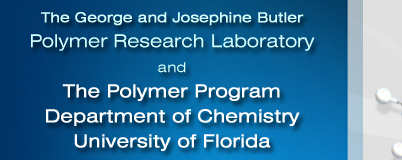
<style>
.page{position:relative;width:402px;height:160px}
.page>*{position:absolute;margin:0}
.t1{font:18px/25px "Swiss721BT-RomanExtended";color:#ffffff;font-weight:bold}
.t2{font:14px/25px "Swiss721BT-RomanExtended";color:#d4ffff;font-weight:bold}
.t3{font:18px/25px "Swiss721BT-RomanExtended";color:#d4ffff}
.t4{font:14px/25px "Swiss721BT-RomanExtended";color:#d4ffff}
</style>
<div class="page">
<p class="t1" style="left:31px;top:12px;width:284px;height:139px;text-align:center"><span class="t2">The George and Josephine Butler<br></span><span class="t3">Polymer Research Laboratory<br></span><span class="t4">and<br></span>The Polymer Program<br>Department of Chemistry<br>University of Florida</p>
</div>
